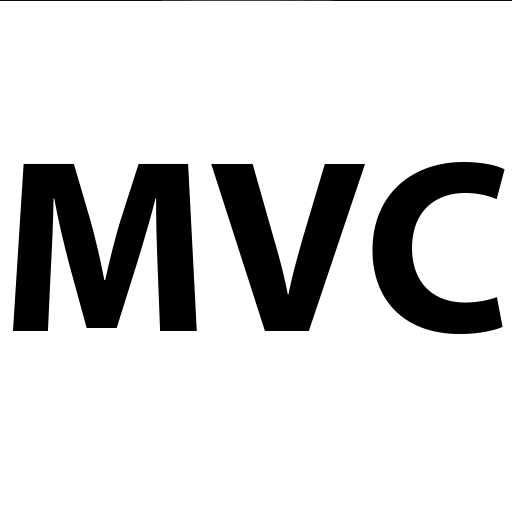
<style>
.page{position:relative;width:512px;height:512px;background:#ffffff}
.page>*{position:absolute;margin:0}
.t1{font:346.4px "MyriadArabic-Bold";color:#000000}
</style>
<div class="page">
<p class="t1" style="left:13px;top:161px;width:492px;height:173px">MVC</p>
</div>
